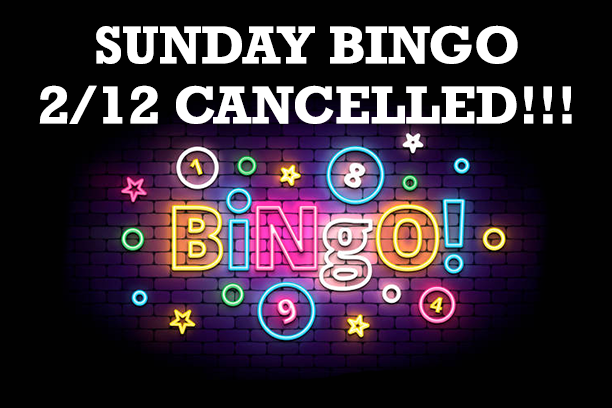
<style>
.page{position:relative;width:612px;height:408px;background:#010101}
.page>*{position:absolute;margin:0}
.t1{font:50px "Rockwell-Bold";color:#ffffff}
</style>
<div class="page">
<p class="t1" style="left:39px;top:25px;width:533px;height:99px;text-align:center">SUNDAY BINGO<br>2/12 CANCELLED!!!</p>
</div>
